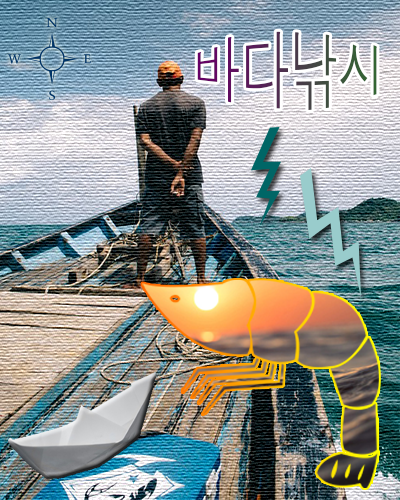
<style>
.page{position:relative;width:400px;height:500px}
.page>*{position:absolute;margin:0}
.t1{font:48.1px "Dotum"}
</style>
<div class="page">
<p class="t1" style="left:197px;top:31px;width:180px;height:79px">바다낚시</p>
</div>
